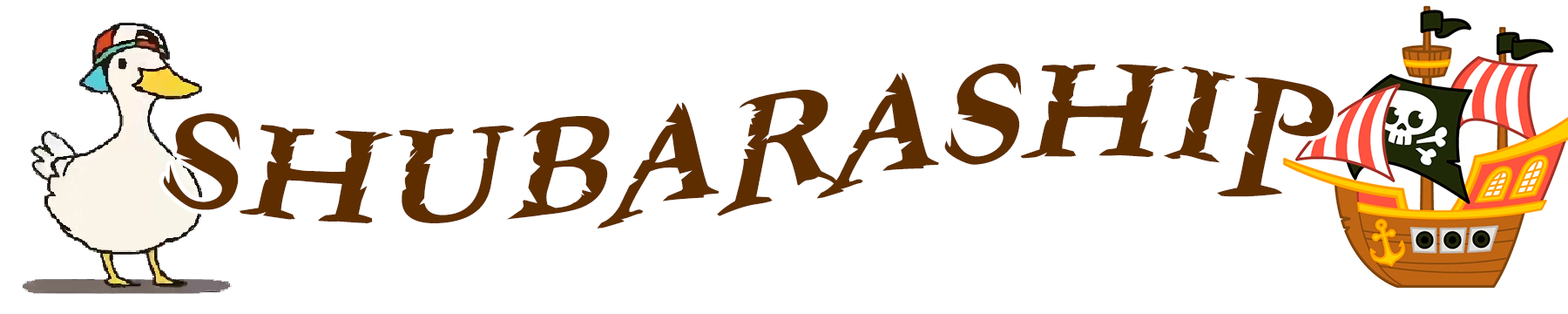
<style>
.page{position:relative;width:1568px;height:314px;background:#ffffff}
.page>*{position:absolute;margin:0}
.t1{font:194.9px "Booter-FiveFive";color:#5e2e00}
</style>
<div class="page">
<p class="t1" style="left:163px;top:64px;width:1172px;height:164px;rotate:-1deg">SHUBARASHIP</p>
</div>
